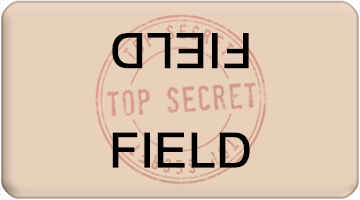
<style>
.page{position:relative;width:360px;height:200px;background:#e8d0bb}
.page>*{position:absolute;margin:0}
.t1{font:48px "ArialMT";color:#000000;font-weight:bold}
</style>
<div class="page">
<p class="t1" style="left:112px;top:33px;width:137px;height:36px;rotate:180deg">FIELD</p>
<p class="t1" style="left:112px;top:132px;width:138px;height:36px">FIELD</p>
</div>
